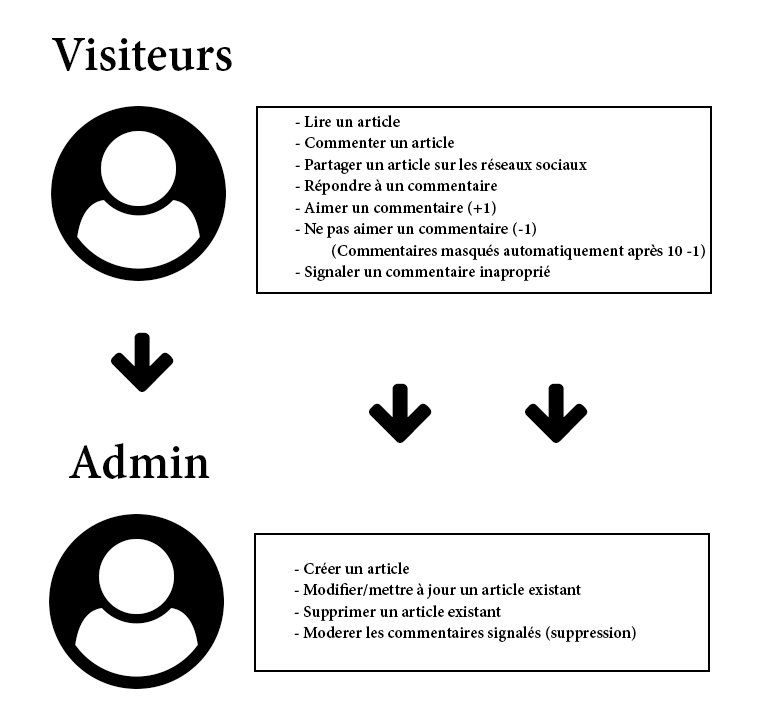
<style>
.page{position:relative;width:761px;height:728px;background:#ffffff}
.page>*{position:absolute;margin:0}
.t1{font:53.7px "AdobeDevanagari-Bold";color:#000000}
.t2{font:17.9px "AdobeDevanagari-Bold";color:#000000}
</style>
<div class="page">
<p class="t1" style="left:52px;top:38px;width:180px;height:33px">Visiteurs</p>
<p class="t2" style="left:295px;top:115px;width:410px;height:166px">- Lire un article<br>- Commenter un article<br>- Partager un article sur les réseaux sociaux<br>- Répondre à un commentaire<br>- Aimer un commentaire (+1)<br>- Ne pas aimer un commentaire (-1)<br> (Commentaires masqués automatiquement après 10 -1)<br>- Signaler un commentaire inaproprié</p>
<p class="t1" style="left:69px;top:443px;width:141px;height:36px">Admin</p>
<p class="t2" style="left:294px;top:562px;width:342px;height:80px">- Créer un article<br>- Modifier/mettre à jour un article existant<br>- Supprimer un article existant<br>- Moderer les commentaires signalés (suppression)</p>
</div>
